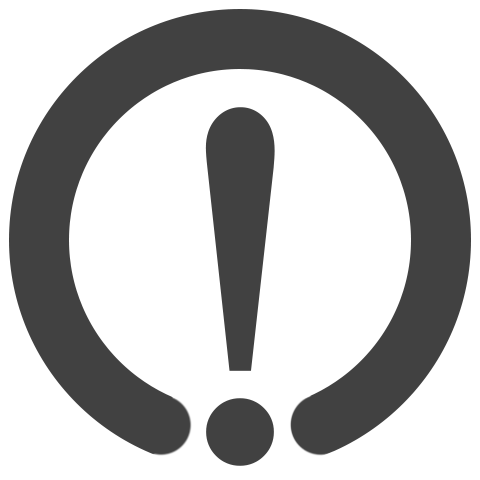
<style>
.page{position:relative;width:480px;height:480px;background:#ffffff}
.page>*{position:absolute;margin:0}
.t1{font:500px "TimesNewRomanPSMT";color:#414141;font-weight:bold}
</style>
<div class="page">
<p class="t1" style="left:205px;top:107px;width:70px;height:359px">!</p>
</div>
